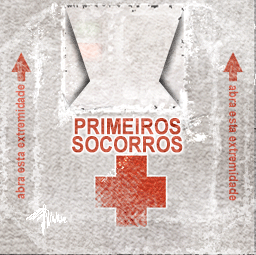
<style>
.page{position:relative;width:256px;height:255px}
.page>*{position:absolute;margin:0}
.t1{font:13px "Arial-BoldMT";color:#d76753;scale:0.84 1}
.t2{font:13px "Arial-BoldMT";color:#c65442;scale:0.84 1}
.t3{font:22px/18px "Arial-BoldMT";color:#c6553e;text-transform:uppercase;font-weight:bold;scale:0.84 1}
</style>
<div class="page">
<p class="t1" style="left:15px;top:84px;width:10px;height:115px;rotate:-90deg">abra esta extremidade</p>
<p class="t2" style="left:229px;top:85px;width:10px;height:116px;rotate:90deg">abra esta extremidade</p>
<p class="t3" style="left:72px;top:118px;width:111px;height:35px;text-align:center">PRIMEIROS<br>SOCORROS</p>
</div>
